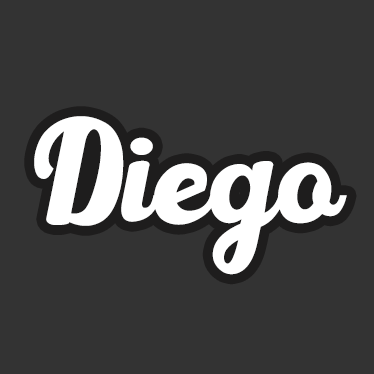
<style>
.page{position:relative;width:374px;height:374px;background:#333333}
.page>*{position:absolute;margin:0}
.t1{font:150px "LightBeachRegular";color:#ffffff}
</style>
<div class="page">
<p class="t1" style="left:34px;top:116px;width:313px;height:159px">Diego</p>
</div>
